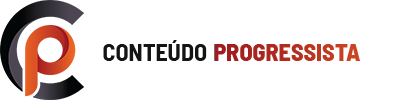
<style>
.page{position:relative;width:400px;height:100px;background:#ffffff}
.page>*{position:absolute;margin:0}
.t1{font:24px "BarlowSemiCondensed-Bold";color:#141414}
.t2{font:24px "BarlowSemiCondensed-ExtraBold";color:#b02c20}
</style>
<div class="page">
<p class="t1" style="left:103px;top:40px;width:104px;height:21px">CONTEÚDO</p>
<p class="t2" style="left:214px;top:44px;width:146px;height:17px">PROGRESSISTA</p>
</div>
